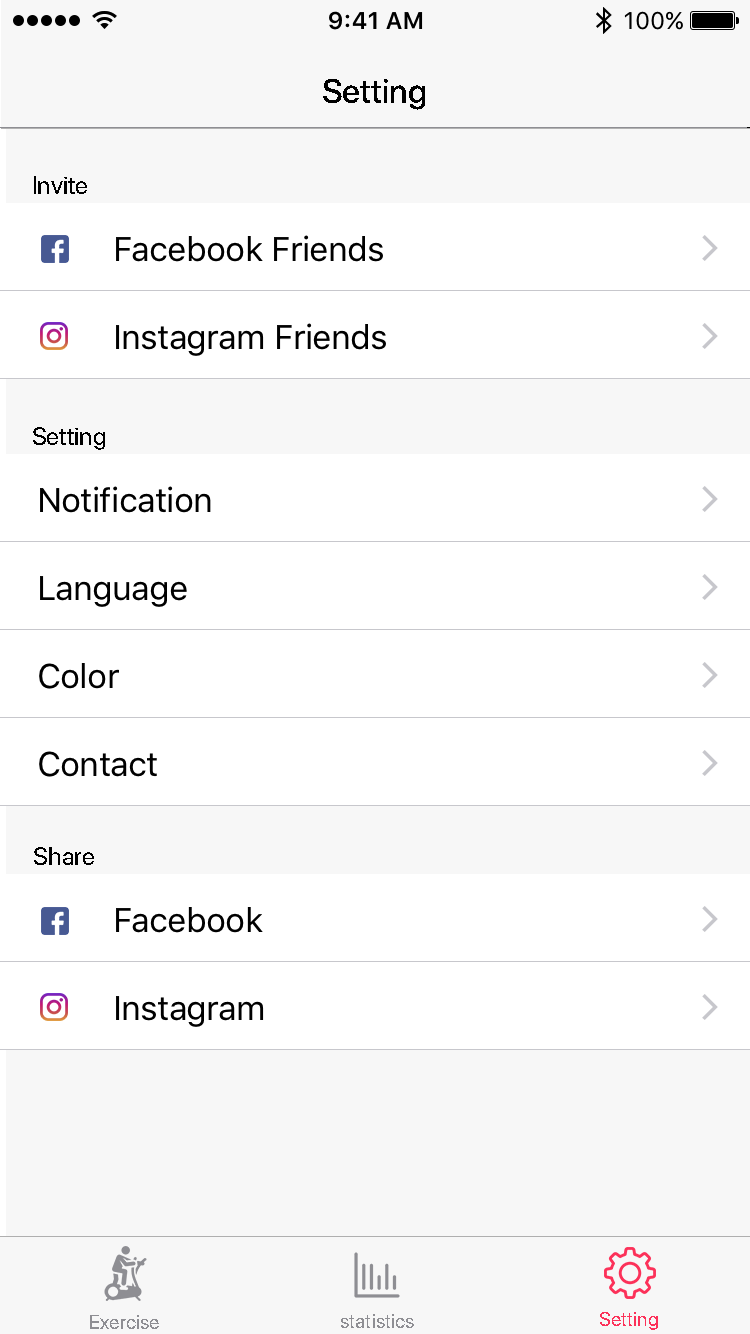
<style>
.page{position:relative;width:750px;height:1334px;background:#ffffff}
.page>*{position:absolute;margin:0}
.t1{font:34px "SFUIDisplay-Medium";color:#000000}
.t2{font:25px "SFUIDisplay-Regular";color:#000000}
.t3{font:34px "SFUIText-Regular";letter-spacing:-0.024em;color:#000000}
.t4{font:20px "SFUIDisplay-Regular";color:#fc3159}
.t5{font:20px "SFUIDisplay-Regular";color:#8e8e93}
</style>
<div class="page">
<p class="t1" style="left:323px;top:79px;width:102px;height:31px">Setting</p>
<p class="t2" style="left:34px;top:176px;width:53px;height:18px">Invite</p>
<p class="t3" style="left:116px;top:235px;width:267px;height:27px">Facebook Friends</p>
<p class="t3" style="left:116px;top:323px;width:270px;height:33px">Instagram Friends</p>
<p class="t2" style="left:33px;top:427px;width:72px;height:23px">Setting</p>
<p class="t3" style="left:40px;top:486px;width:171px;height:27px">Notification</p>
<p class="t3" style="left:40px;top:576px;width:147px;height:31px">Language</p>
<p class="t3" style="left:39px;top:663px;width:80px;height:26px">Color</p>
<p class="t3" style="left:39px;top:751px;width:118px;height:26px">Contact</p>
<p class="t2" style="left:34px;top:847px;width:60px;height:18px">Share</p>
<p class="t3" style="left:116px;top:907px;width:147px;height:26px">Facebook</p>
<p class="t3" style="left:116px;top:996px;width:148px;height:31px">Instagram</p>
<p class="t4" style="left:600px;top:1312px;width:58px;height:18px">Setting</p>
<p class="t5" style="left:90px;top:1315px;width:69px;height:14px">Exercise</p>
<p class="t5" style="left:341px;top:1314px;width:73px;height:14px">statistics</p>
</div>
